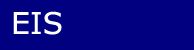
<style>
.page{position:relative;width:194px;height:50px;background:#000080}
.page>*{position:absolute;margin:0}
.t1{font:30px "Verdana";color:#ffffff}
</style>
<div class="page">
<p class="t1" style="left:11px;top:11px;width:52px;height:36px">EIS</p>
</div>
